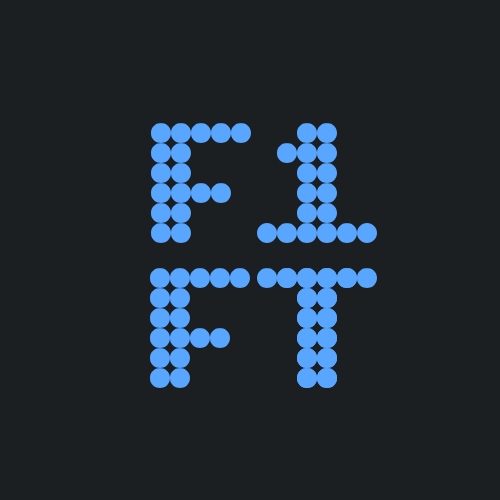
<style>
.page{position:relative;width:500px;height:500px;background:#1c1f21}
.page>*{position:absolute;margin:0}
.t1{font:200px "BitcountGridDoubleRoman-Regular";color:#58a6ff}
</style>
<div class="page">
<p class="t1" style="left:151px;top:123px;width:100px;height:120px">F</p>
<p class="t1" style="left:277px;top:123px;width:80px;height:120px">1</p>
<p class="t1" style="left:150px;top:268px;width:100px;height:120px">F</p>
<p class="t1" style="left:257px;top:268px;width:101px;height:120px;rotate:-180deg">T</p>
<p class="t1" style="left:277px;top:268px;width:100px;height:120px">T</p>
</div>
